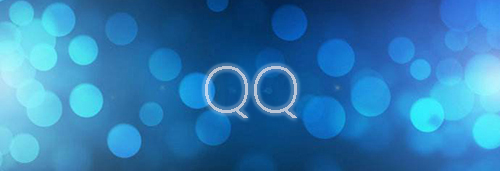
<style>
.page{position:relative;width:500px;height:171px}
.page>*{position:absolute;margin:0}
.t1{font:60px "MicrosoftYaHeiUILight";color:#b9c6d9}
</style>
<div class="page">
<p class="t1" style="left:205px;top:66px;width:92px;height:52px">QQ</p>
</div>
